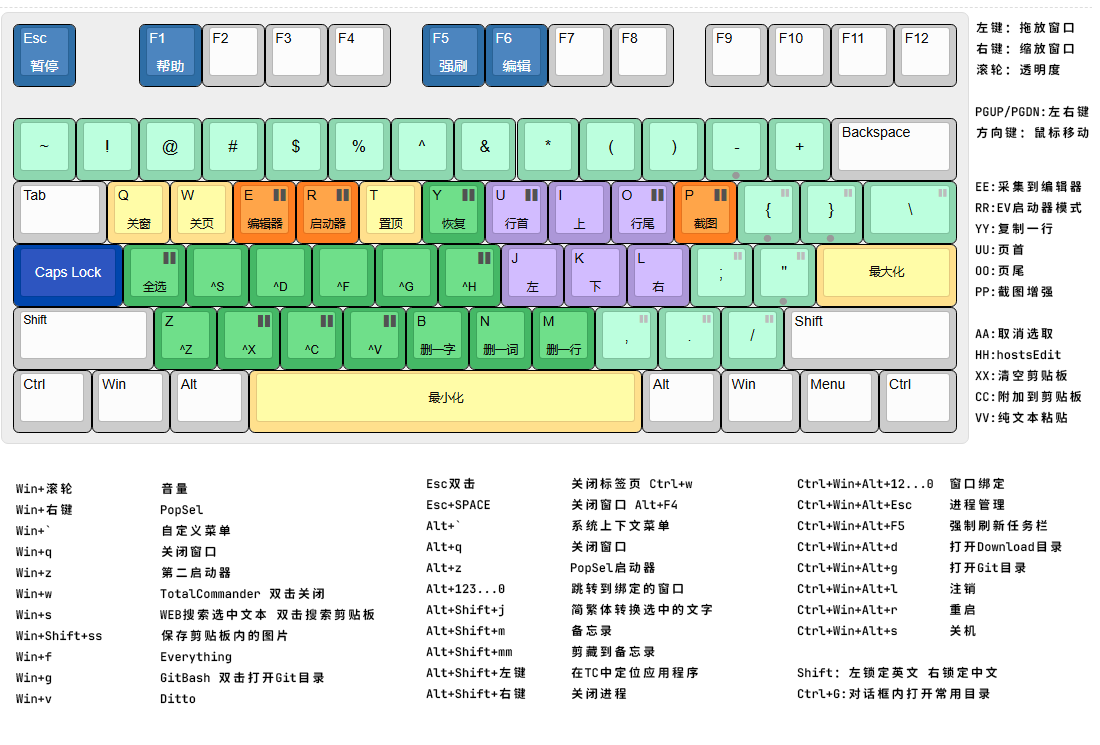
<style>
.page{position:relative;width:1100px;height:745px;background:#ffffff}
.page>*{position:absolute;margin:0}
.t1{font:12px "JetBrainsMapleMono-SemiBold";color:#000000}
</style>
<div class="page">
<p class="t1" style="left:975px;top:21px;width:114px;height:118px">左键：拖放窗口<br>右键：缩放窗口<br>滚轮：透明度<br><br>PGUP/PGDN:左右键<br>方向键：鼠标移动</p>
<p class="t1" style="left:975px;top:180px;width:107px;height:244px">EE:采集到编辑器<br>RR:EV启动器模式<br>YY:复制一行<br>UU:页首<br>OO:页尾<br>PP:截图增强<br><br>AA:取消选取<br>HH:hostsEdit<br>XX:清空剪贴板<br>CC:附加到剪贴板<br>VV:纯文本粘贴</p>
<p class="t1" style="left:16px;top:482px;width:359px;height:222px">Win+滚轮            音量<br>Win+右键            PopSel<br>Win+`               自定义菜单<br>Win+q               关闭窗口<br>Win+z               第二启动器<br>Win+w               TotalCommander 双击关闭<br>Win+s               WEB搜索选中文本 双击搜索剪贴板<br>Win+Shift+ss        保存剪贴板内的图片<br>Win+f               Everything<br>Win+g               GitBash 双击打开Git目录<br>Win+v               Ditto</p>
<p class="t1" style="left:426px;top:477px;width:286px;height:223px">Esc双击             关闭标签页 Ctrl+w<br>Esc+SPACE           关闭窗口 Alt+F4<br>Alt+`               系统上下文菜单<br>Alt+q               关闭窗口<br>Alt+z               PopSel启动器<br>Alt+123...0         跳转到绑定的窗口<br>Alt+Shift+j         简繁体转换选中的文字<br>Alt+Shift+m         备忘录<br>Alt+Shift+mm        剪藏到备忘录<br>Alt+Shift+左键      在TC中定位应用程序<br>Alt+Shift+右键      关闭进程</p>
<p class="t1" style="left:797px;top:477px;width:265px;height:223px">Ctrl+Win+Alt+12...0  窗口绑定<br>Ctrl+Win+Alt+Esc     进程管理<br>Ctrl+Win+Alt+F5      强制刷新任务栏<br>Ctrl+Win+Alt+d       打开Download目录<br>Ctrl+Win+Alt+g       打开Git目录<br>Ctrl+Win+Alt+l       注销<br>Ctrl+Win+Alt+r       重启<br>Ctrl+Win+Alt+s       关机<br><br>Shift：左锁定英文 右锁定中文<br>Ctrl+G:对话框内打开常用目录</p>
</div>
